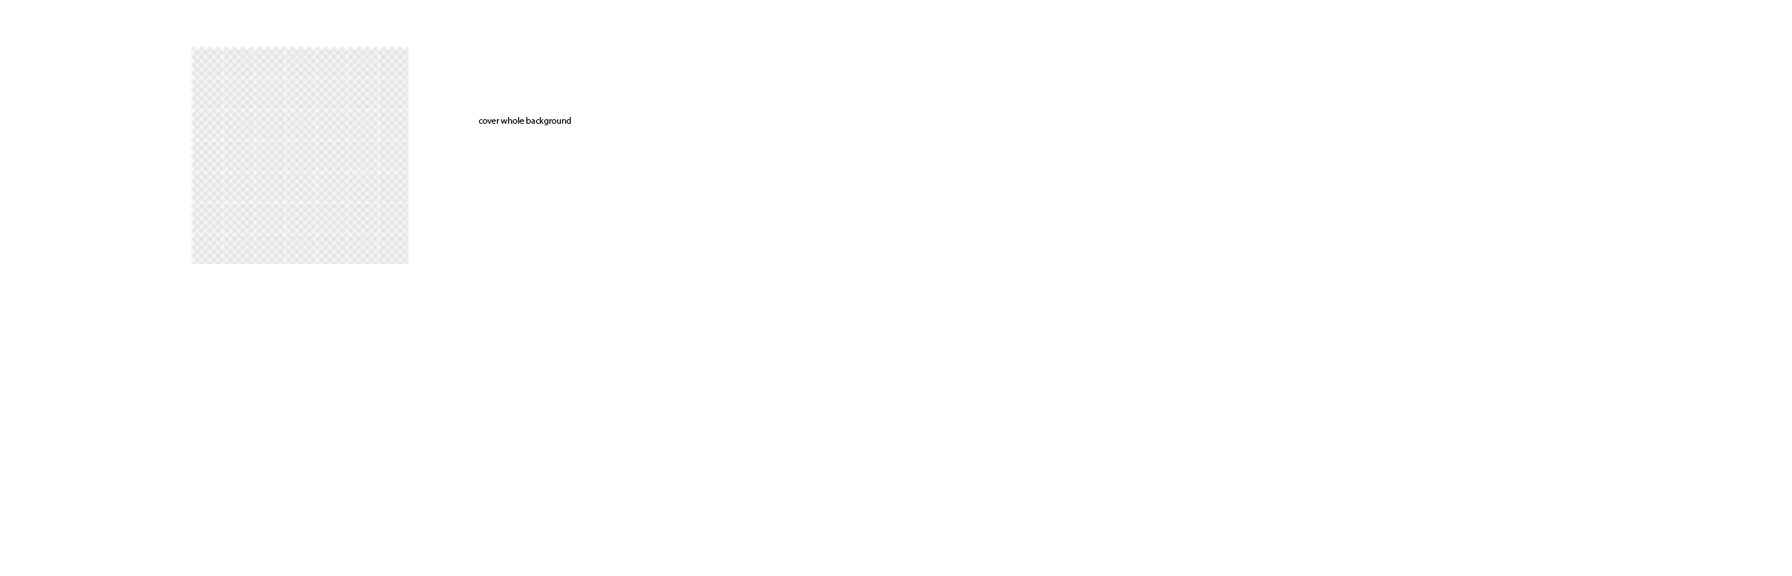
<style>
.page{position:relative;width:1792px;height:576px;background:#ffffff}
.page>*{position:absolute;margin:0}
.t1{font:9px "MyriadPro-Regular";color:#000000}
</style>
<div class="page">
<p class="t1" style="left:478px;top:117px;width:94px;height:8px">cover whole background</p>
</div>
